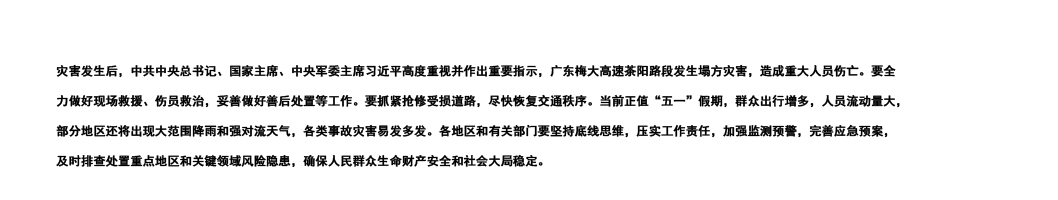
<style>
.page{position:relative;width:1058px;height:200px;background:#ffffff}
.page>*{position:absolute;margin:0}
.t1{font:12px/30px "SimHei";color:#000000;font-weight:bold}
</style>
<div class="page">
<p class="t1" style="left:56px;top:64px;width:844px;height:103px">灾害发生后，中共中央总书记、国家主席、中央军委主席习近平高度重视并作出重要指示，广东梅大高速茶阳路段发生塌方灾害，造成重大人员伤亡。要全<br>力做好现场救援、伤员救治，妥善做好善后处置等工作。要抓紧抢修受损道路，尽快恢复交通秩序。当前正值“五一”假期，群众出行增多，人员流动量大，<br>部分地区还将出现大范围降雨和强对流天气，各类事故灾害易发多发。各地区和有关部门要坚持底线思维，压实工作责任，加强监测预警，完善应急预案，<br>及时排查处置重点地区和关键领域风险隐患，确保人民群众生命财产安全和社会大局稳定。</p>
</div>
